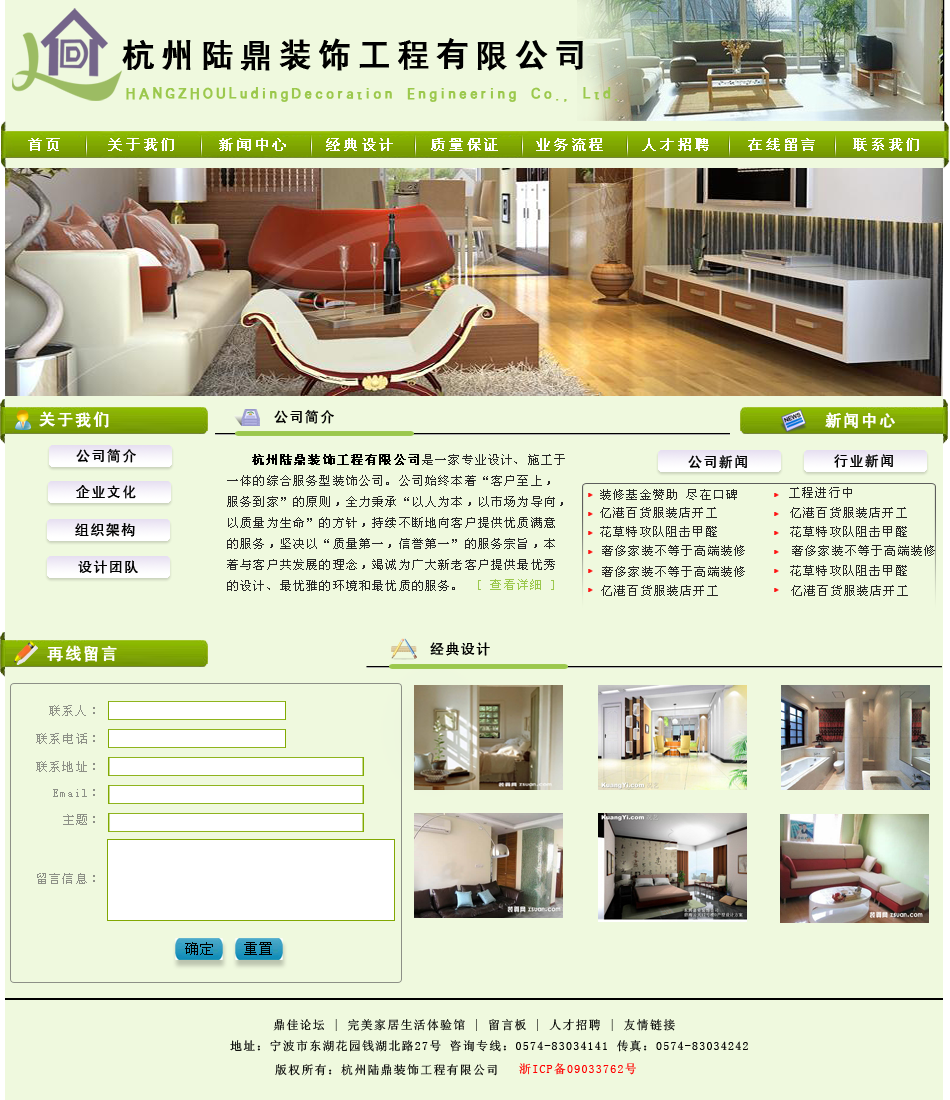
<style>
.page{position:relative;width:950px;height:1100px;background:#eff9de}
.page>*{position:absolute;margin:0}
.t1{font:32px "¾­µäºÚÌå¼ò-regular";letter-spacing:0.2em;color:#000000;font-weight:bold}
.t2{font:16px "¾­µäºÚÌå¼ò-regular";letter-spacing:0.2em;color:#9bc84c;font-weight:bold}
.t3{font:14px "SimSun";letter-spacing:0.2em;color:#ffffff;font-weight:bold}
.t4{font:16px "¾­µäºÚÌå¼ò-regular";letter-spacing:0.1em;color:#ffffff;font-weight:bold}
.t5{font:14px "¾­µäºÚÌå¼ò-regular";letter-spacing:0.1em;color:#000000}
.t6{font:12px "SimSun";letter-spacing:0.1em;color:#282828}
.t7{font:12px "SimSun";letter-spacing:0.1em;color:#000000;font-weight:bold}
.t8{font:12px "SimSun";letter-spacing:0.1em;color:#9bc84c}
.t9{font:12px "SimSun";letter-spacing:0.1em;color:#8d9087}
.t10{font:14px "SimSun";letter-spacing:0.1em;color:#000000}
.t11{font:12px "SimSun";letter-spacing:0.1em;color:#000000}
.t12{font:12px "SimSun";letter-spacing:0.1em;color:#ff0000}
</style>
<div class="page">
<p class="t1" style="left:122px;top:38px;width:461px;height:33px">杭州陆鼎装饰工程有限公司</p>
<p class="t2" style="left:126px;top:87px;width:491px;height:15px">HANGZHOULudingDecoration Engineering Co., Ltd.</p>
<p class="t3" style="left:28px;top:138px;width:32px;height:13px">首页</p>
<p class="t3" style="left:108px;top:138px;width:66px;height:13px">关于我们</p>
<p class="t3" style="left:219px;top:138px;width:67px;height:13px">新闻中心</p>
<p class="t3" style="left:326px;top:138px;width:67px;height:13px">经典设计</p>
<p class="t3" style="left:431px;top:138px;width:67px;height:13px">质量保证</p>
<p class="t3" style="left:536px;top:138px;width:67px;height:13px">业务流程</p>
<p class="t3" style="left:642px;top:138px;width:67px;height:13px">人才招聘</p>
<p class="t3" style="left:748px;top:138px;width:67px;height:13px">在线留言</p>
<p class="t3" style="left:853px;top:138px;width:66px;height:13px">联系我们</p>
<p class="t4" style="left:39px;top:411px;width:70px;height:17px">关于我们</p>
<p class="t5" style="left:274px;top:409px;width:60px;height:15px">公司简介</p>
<p class="t4" style="left:825px;top:412px;width:70px;height:17px">新闻中心</p>
<p class="t5" style="left:76px;top:448px;width:60px;height:15px">公司简介</p>
<p class="t6" style="left:227px;top:454px;width:338px;height:137px"><span class="t7">   杭州陆鼎装饰工程有限公司</span>是一家专业设计、施工于<br>一体的综合服务型装饰公司。公司始终本着“客户至上，<br>服务到家”的原则，全力秉承“以人为本，以市场为导向，<br>以质量为生命”的方针，持续不断地向客户提供优质满意<br>的服务，坚决以“质量第一，信誉第一”的服务宗旨，本<br>着与客户共发展的理念，竭诚为广大新老客户提供最优秀<br>的设计、最优雅的环境和最优质的服务。</p>
<p class="t5" style="left:688px;top:455px;width:59px;height:14px">公司新闻</p>
<p class="t5" style="left:834px;top:454px;width:59px;height:14px">行业新闻</p>
<p class="t5" style="left:76px;top:485px;width:60px;height:14px">企业文化</p>
<p class="t6" style="left:600px;top:489px;width:137px;height:11px">装修基金赞助 尽在口碑</p>
<p class="t6" style="left:789px;top:487px;width:63px;height:11px">工程进行中</p>
<p class="t6" style="left:600px;top:507px;width:117px;height:11px">亿港百货服装店开工</p>
<p class="t6" style="left:790px;top:507px;width:117px;height:11px">亿港百货服装店开工</p>
<p class="t5" style="left:75px;top:523px;width:60px;height:14px">组织架构</p>
<p class="t6" style="left:600px;top:526px;width:117px;height:11px">花草特攻队阻击甲醛</p>
<p class="t6" style="left:790px;top:526px;width:117px;height:11px">花草特攻队阻击甲醛</p>
<p class="t6" style="left:602px;top:545px;width:143px;height:11px">奢侈家装不等于高端装修</p>
<p class="t6" style="left:792px;top:545px;width:143px;height:11px">奢侈家装不等于高端装修</p>
<p class="t5" style="left:78px;top:560px;width:60px;height:14px">设计团队</p>
<p class="t6" style="left:602px;top:566px;width:143px;height:11px">奢侈家装不等于高端装修</p>
<p class="t6" style="left:790px;top:565px;width:117px;height:11px">花草特攻队阻击甲醛</p>
<p class="t8" style="left:478px;top:579px;width:76px;height:11px">[ 查看详细 ]</p>
<p class="t6" style="left:601px;top:585px;width:117px;height:11px">亿港百货服装店开工</p>
<p class="t6" style="left:791px;top:585px;width:117px;height:11px">亿港百货服装店开工</p>
<p class="t4" style="left:47px;top:645px;width:70px;height:17px">再线留言</p>
<p class="t5" style="left:430px;top:642px;width:60px;height:14px">经典设计</p>
<p class="t9" style="left:49px;top:705px;width:46px;height:11px">联系人：</p>
<p class="t9" style="left:36px;top:733px;width:59px;height:11px">联系电话：</p>
<p class="t9" style="left:36px;top:761px;width:59px;height:11px">联系地址：</p>
<p class="t9" style="left:53px;top:789px;width:42px;height:8px">Email：</p>
<p class="t9" style="left:63px;top:814px;width:32px;height:11px">主题：</p>
<p class="t9" style="left:37px;top:873px;width:58px;height:11px">留言信息：</p>
<p class="t10" style="left:185px;top:942px;width:28px;height:13px">确定</p>
<p class="t10" style="left:244px;top:942px;width:28px;height:13px">重置</p>
<p class="t11" style="left:230px;top:1019px;width:518px;height:33px">鼎佳论坛 | 完美家居生活体验馆 | 留言板 | 人才招聘 | 友情链接   <br>地址：宁波市东湖花园钱湖北路27号 咨询专线：0574-83034141 传真：0574-83034242</p>
<p class="t11" style="left:275px;top:1064px;width:222px;height:12px">版权所有：杭州陆鼎装饰工程有限公司</p>
<p class="t12" style="left:519px;top:1063px;width:117px;height:12px">浙ICP备09033762号</p>
</div>
